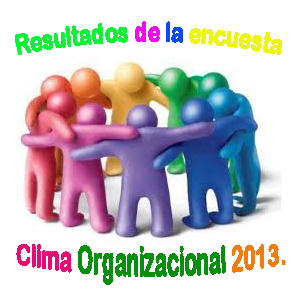
<style>
.page{position:relative;width:300px;height:300px;background:#ffffff}
.page>*{position:absolute;margin:0}
.t1{font:28px "ArialRoundedMTBold";letter-spacing:0.01em;color:#08f534;scale:0.71 1}
.t2{font:28px "ArialRoundedMTBold";letter-spacing:0.01em;color:#f507f8;scale:0.71 1}
.t3{font:28px "ArialRoundedMTBold";letter-spacing:0.01em;color:#0a49fd;scale:0.71 1}
.t4{font:28px "ArialRoundedMTBold";letter-spacing:0.01em;color:#eef608;scale:0.71 1}
.t5{font:28px "ArialRoundedMTBold";letter-spacing:0.01em;color:#05900c;scale:0.71 1}
.t6{font:28px "ArialRoundedMTBold";letter-spacing:0.01em;color:#ee0774;scale:0.71 1}
.t7{font:28px "ArialRoundedMTBold";letter-spacing:0.01em;color:#f87a0b;scale:0.71 1}
</style>
<div class="page">
<p class="t1" style="left:15px;top:21px;width:267px;height:34px">Resultados <span class="t2">de </span><span class="t3">la </span><span class="t4">encuesta</span></p>
<p class="t5" style="left:16px;top:244px;width:270px;height:41px"><span class="t6">Clima </span>Organizacional <span class="t7">2013.</span></p>
</div>
